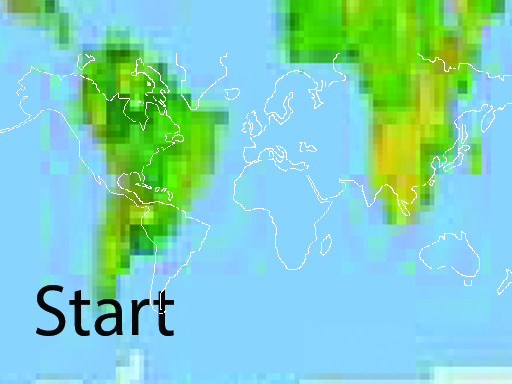
<style>
.page{position:relative;width:512px;height:384px;background:#87d5ff}
.page>*{position:absolute;margin:0}
.t1{font:72px "MyriadPro-Regular";color:#060808}
</style>
<div class="page">
<p class="t1" style="left:36px;top:285px;width:138px;height:51px">Start</p>
</div>
